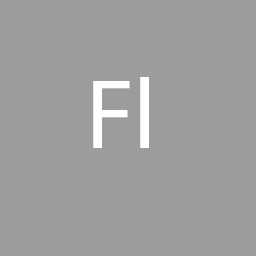
<style>
.page{position:relative;width:256px;height:256px;background:#9c9c9c}
.page>*{position:absolute;margin:0}
.t1{font:100px "MyriadPro-Regular";color:#ffffff}
</style>
<div class="page">
<p class="t1" style="left:93px;top:77px;width:56px;height:71px">Fl</p>
</div>
